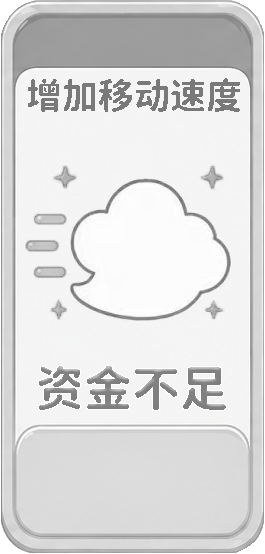
<style>
.page{position:relative;width:265px;height:554px}
.page>*{position:absolute;margin:0}
.t1{font:36px "Resource-Han-Rounded-CN-Bold";color:#797979}
.t2{font:48px "Resource-Han-Rounded-CN-Bold";color:#838383}
</style>
<div class="page">
<p class="t1" style="left:28px;top:78px;width:212px;height:34px">增加移动速度</p>
<p class="t2" style="left:39px;top:366px;width:187px;height:44px">资金不足</p>
</div>
